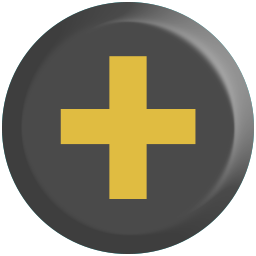
<style>
.page{position:relative;width:256px;height:256px;background:#4a4a4a}
.page>*{position:absolute;margin:0}
.t1{font:276px "Roboto-Bold";color:#e0bc41}
</style>
<div class="page">
<p class="t1" style="left:60px;top:56px;width:136px;height:143px;rotate:180deg">+</p>
</div>
